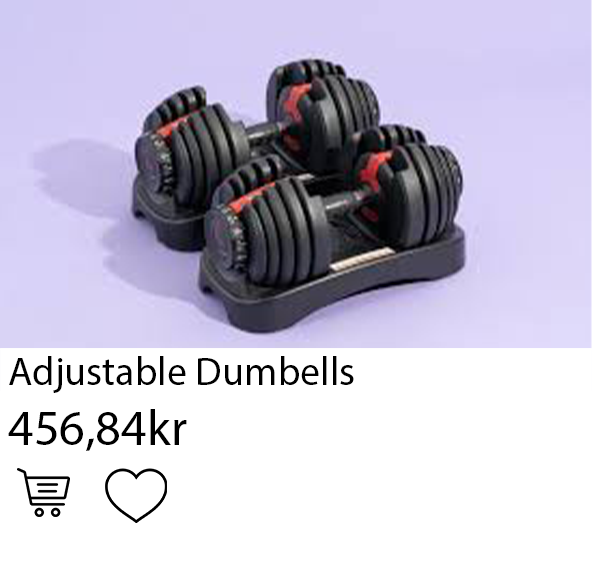
<style>
.page{position:relative;width:592px;height:567px;background:#ffffff}
.page>*{position:absolute;margin:0}
.t1{font:40px "MyriadPro-Regular";color:#000000}
.t2{font:50px "MyriadPro-Regular";color:#000000}
</style>
<div class="page">
<p class="t1" style="left:8px;top:356px;width:346px;height:95px">Adjustable Dumbells<br><span class="t2">456,84kr<br>128,45kr</span></p>
</div>
